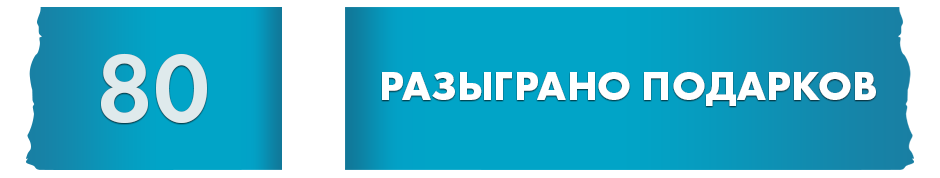
<style>
.page{position:relative;width:940px;height:178px;background:#ffffff}
.page>*{position:absolute;margin:0}
.t1{font:100px "FuturaPT-Demi";color:#dfeaec;text-transform:uppercase}
.t2{font:41.7px "FuturaPT-Bold";color:#ffffff;text-transform:uppercase}
</style>
<div class="page">
<p class="t1" style="left:101px;top:53px;width:106px;height:70px">80</p>
<p class="t2" style="left:382px;top:72px;width:494px;height:34px">разыграно подарков</p>
</div>
